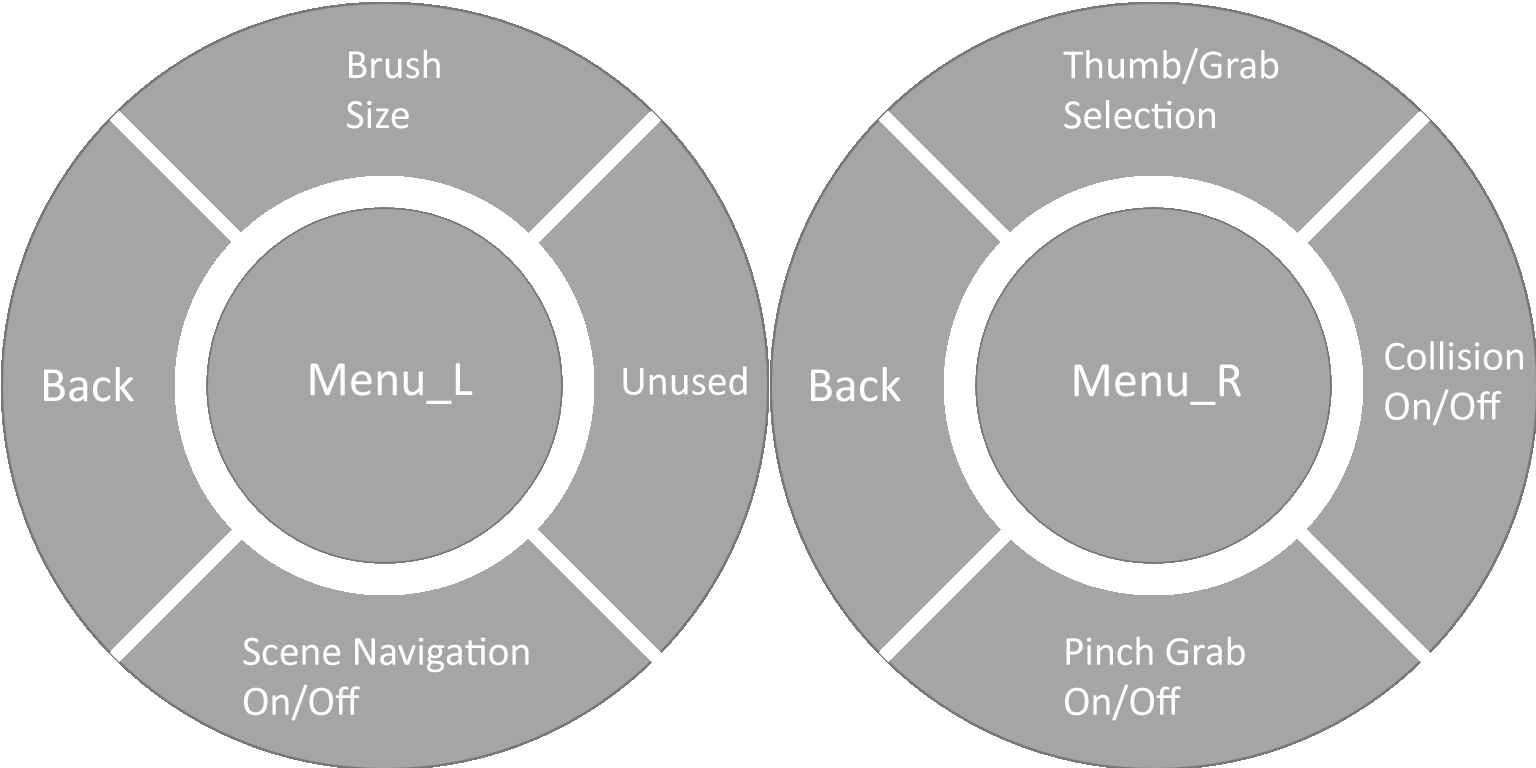
<style>
.page{position:relative;width:1536px;height:768px;background:#a5a5a5}
.page>*{position:absolute;margin:0}
.t1{font:41.7px "Calibri";color:#ffffff}
.t2{font:50px "Calibri";color:#ffffff}
</style>
<div class="page">
<p class="t1" style="left:347px;top:49px;width:93px;height:80px">Brush <br>Size</p>
<p class="t1" style="left:1063px;top:48px;width:216px;height:81px">Thumb/Grab <br>Selection</p>
<p class="t1" style="left:1385px;top:341px;width:138px;height:85px">Collision <br>On/Off</p>
<p class="t2" style="left:310px;top:363px;width:163px;height:41px">Menu_L</p>
<p class="t1" style="left:623px;top:366px;width:124px;height:29px">Unused</p>
<p class="t2" style="left:1074px;top:364px;width:167px;height:41px">Menu_R</p>
<p class="t2" style="left:44px;top:367px;width:90px;height:35px">Back</p>
<p class="t2" style="left:811px;top:367px;width:90px;height:35px">Back</p>
<p class="t1" style="left:243px;top:637px;width:286px;height:84px">Scene Navigation<br>On/Off</p>
<p class="t1" style="left:1065px;top:636px;width:180px;height:85px">Pinch Grab<br>On/Off</p>
</div>
